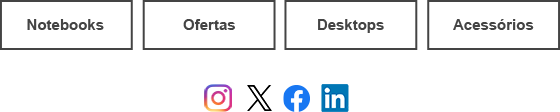
<style>
.page{position:relative;width:560px;height:112px;background:#ffffff}
.page>*{position:absolute;margin:0}
.t1{font:15px "Arial-BoldMT";color:#444444}
</style>
<div class="page">
<p class="t1" style="left:27px;top:19px;width:77px;height:11px">Notebooks</p>
<p class="t1" style="left:183px;top:19px;width:52px;height:11px">Ofertas</p>
<p class="t1" style="left:318px;top:19px;width:66px;height:14px">Desktops</p>
<p class="t1" style="left:453px;top:19px;width:81px;height:11px">Acessórios</p>
</div>
